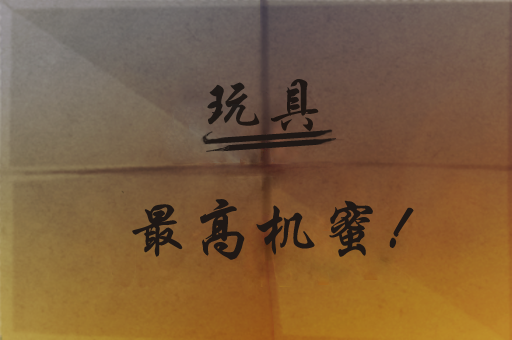
<style>
.page{position:relative;width:512px;height:340px}
.page>*{position:absolute;margin:0}
.t1{font:64px "STXingkai";color:#1e1815}
.t2{font:64px "STXingkai";color:#1f1815}
</style>
<div class="page">
<p class="t1" style="left:207px;top:79px;width:112px;height:52px">玩具</p>
<p class="t2" style="left:132px;top:199px;width:282px;height:61px">最高机蜜！</p>
</div>
